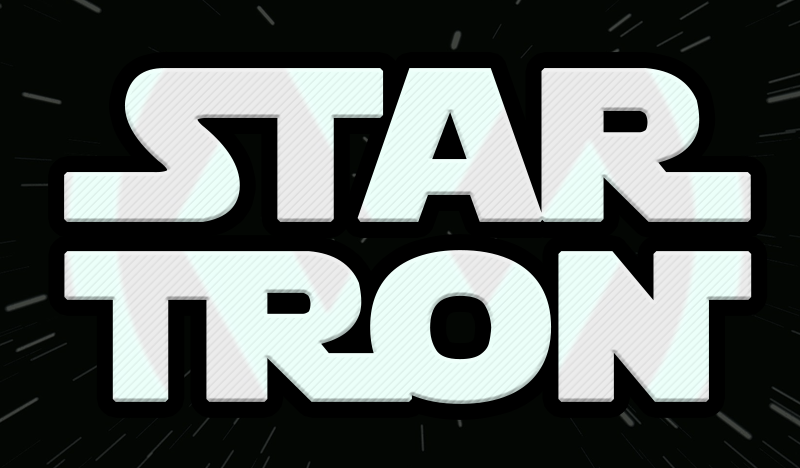
<style>
.page{position:relative;width:800px;height:468px;background:#030603}
.page>*{position:absolute;margin:0}
.t1{font:209.3px "StarJedi";color:#ffffff;font-weight:bold;scale:1.05 1}
.t2{font:205.5px "StarJedi";color:#ffffff;font-weight:bold;scale:1.05 1}
</style>
<div class="page">
<p class="t1" style="left:64px;top:68px;width:687px;height:154px">STaR</p>
<p class="t2" style="left:64px;top:250px;width:688px;height:154px">TRoN</p>
</div>
